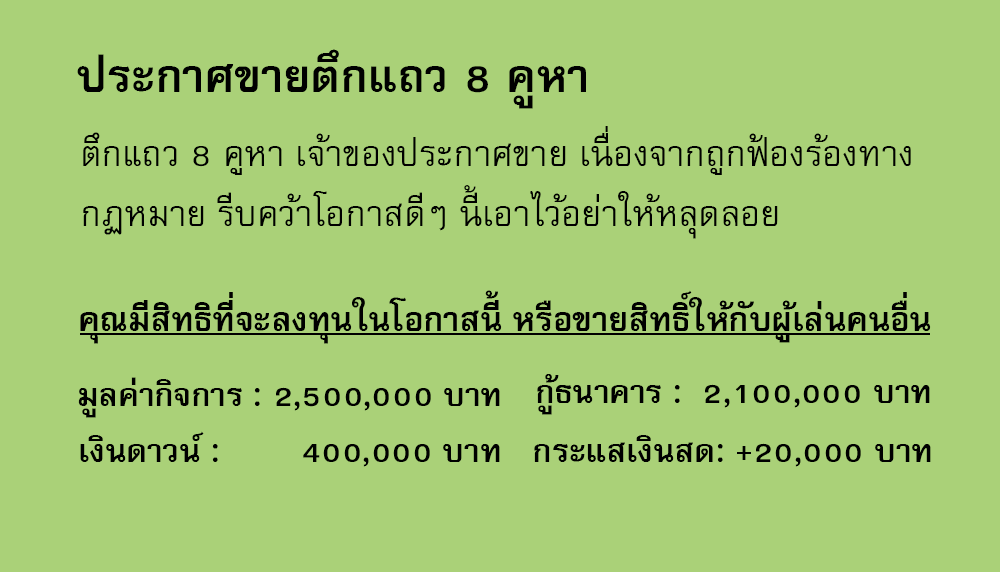
<style>
.page{position:relative;width:1000px;height:572px;background:#aad178}
.page>*{position:absolute;margin:0}
.t1{font:64px "FreesiaUPCBold";color:#000000}
.t2{font:50px/60px "FreesiaUPC";color:#000000}
.t3{font:47px "FreesiaUPCBold";color:#000000}
.t4{font:45px "FreesiaUPCBold";color:#000000}
</style>
<div class="page">
<p class="t1" style="left:77px;top:49px;width:509px;height:60px">ประกาศขายตึกแถว 8 คูหา</p>
<p class="t2" style="left:83px;top:126px;width:828px;height:113px">ตึกแถว 8 คูหา เจ้าของประกาศขาย เนื่องจากถูกฟ้องร้องทาง<br>กฏหมาย รีบคว้าโอกาสดีๆ นี้เอาไว้อย่าให้หลุดลอย</p>
<p class="t3" style="left:80px;top:290px;width:851px;height:54px">คุณมีสิทธิที่จะลงทุนในโอกาสนี้ หรือขายสิทธิ์ให้กับผู้เล่นคนอื่น</p>
<p class="t4" style="left:78px;top:377px;width:422px;height:41px">มูลค่ากิจการ : 2,500,000 บาท</p>
<p class="t4" style="left:537px;top:374px;width:393px;height:41px">กู้ธนาคาร :  2,100,000 บาท</p>
<p class="t4" style="left:80px;top:431px;width:420px;height:36px">เงินดาวน์ :        400,000 บาท</p>
<p class="t4" style="left:534px;top:435px;width:397px;height:32px">กระแสเงินสด: +20,000 บาท</p>
</div>
